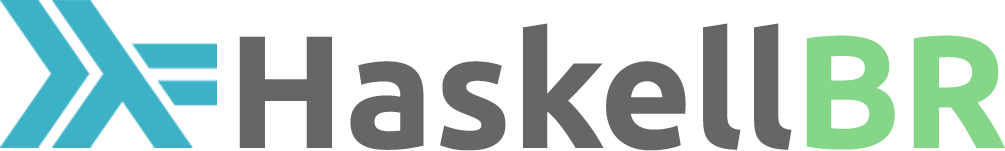
<style>
.page{position:relative;width:1005px;height:151px;background:#ffffff}
.page>*{position:absolute;margin:0}
.t1{font:160.2px "Ubuntu-Bold";color:#666666}
.t2{font:160.2px "Ubuntu-Bold";color:#85d689}
</style>
<div class="page">
<p class="t1" style="left:239px;top:23px;width:766px;height:128px">Haskell<span class="t2">BR</span></p>
</div>
